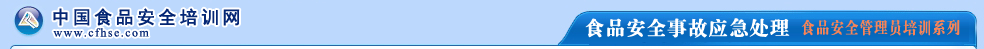
<style>
.page{position:relative;width:984px;height:49px;background:#bcd8fd}
.page>*{position:absolute;margin:0}
.t1{font:18px "SimHei";letter-spacing:0.16em;color:#042674;font-weight:bold}
.t2{font:12px "TimesNewRomanPSMT";letter-spacing:0.12em;color:#042674}
.t3{font:20px "FZDBSJW--GB1-0";color:#ffffff;font-weight:bold}
.t4{font:16.8px "FZDBSJW--GB1-0";letter-spacing:0.04em;color:#f88457;scale:0.83 1}
</style>
<div class="page">
<p class="t1" style="left:53px;top:8px;width:187px;height:18px">中国食品安全培训网</p>
<p class="t2" style="left:53px;top:28px;width:96px;height:9px">www.cfhse.com</p>
<p class="t3" style="left:585px;top:18px;width:205px;height:20px">食品安全事故应急处理</p>
<p class="t4" style="left:801px;top:19px;width:159px;height:17px">食品安全管理员培训系列</p>
</div>
